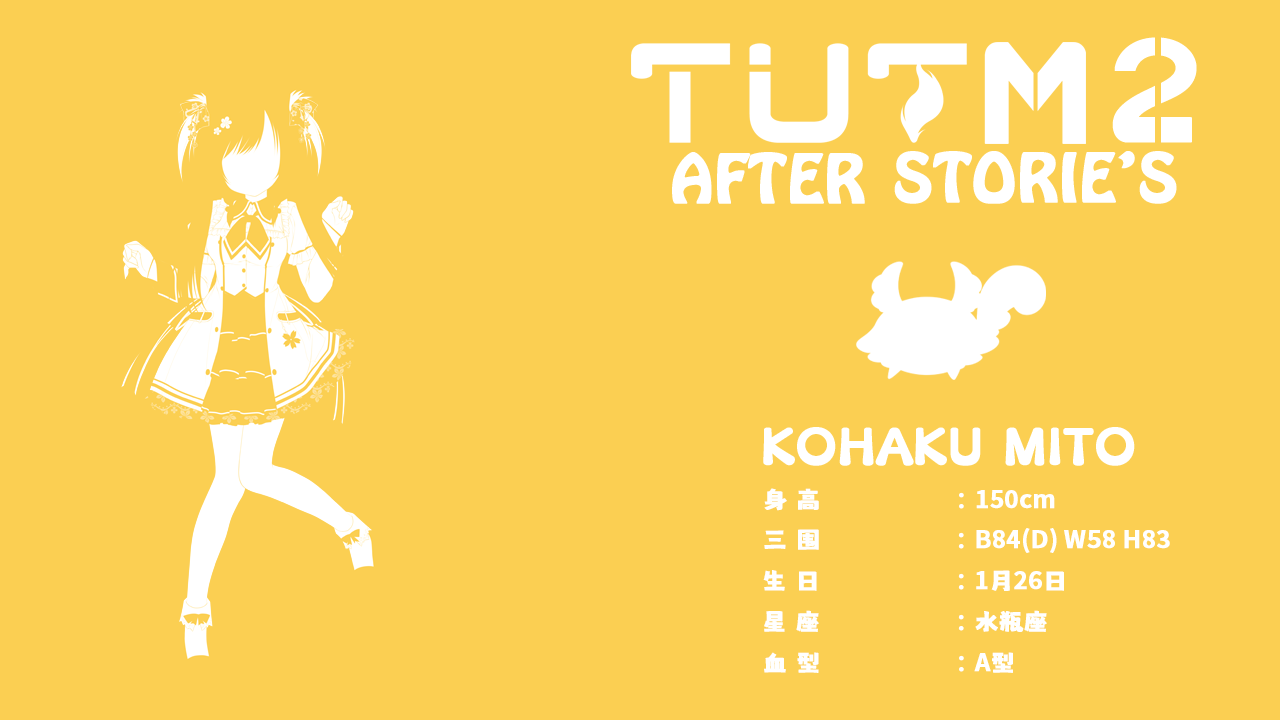
<style>
.page{position:relative;width:1280px;height:720px;background:#fbcf52}
.page>*{position:absolute;margin:0}
.t1{font:24px "MaokenAssortedSans";color:#ffffff;font-weight:bold}
.t2{font:24px "AdobeHeitiStd-Regular";color:#ffffff;font-weight:bold}
.t3{font:24px "SourceHanSansSC-Bold";color:#ffffff;font-weight:bold}
</style>
<div class="page">
<p class="t1" style="left:764px;top:488px;width:200px;height:23px">身 高               <span class="t2">：</span></p>
<p class="t3" style="left:976px;top:490px;width:79px;height:19px">150cm</p>
<p class="t1" style="left:764px;top:529px;width:200px;height:21px">三 围               <span class="t2">：</span></p>
<p class="t3" style="left:976px;top:528px;width:194px;height:25px">B84(D) W58 H83</p>
<p class="t1" style="left:763px;top:570px;width:201px;height:21px">生 日               <span class="t2">：</span></p>
<p class="t3" style="left:976px;top:570px;width:88px;height:21px">1<span class="t1">月</span>26<span class="t1">日</span></p>
<p class="t1" style="left:764px;top:610px;width:200px;height:22px">星 座               <span class="t2">：</span></p>
<p class="t1" style="left:975px;top:610px;width:72px;height:22px">水瓶座</p>
<p class="t1" style="left:764px;top:652px;width:200px;height:21px">血 型               <span class="t2">：</span></p>
<p class="t3" style="left:974px;top:652px;width:39px;height:21px">A<span class="t1">型</span></p>
</div>
